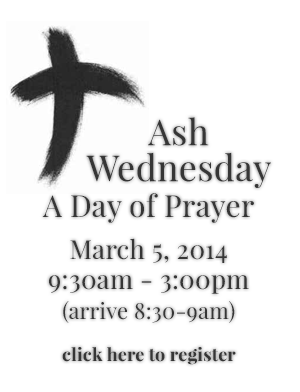
<style>
.page{position:relative;width:300px;height:392px;background:#ffffff}
.page>*{position:absolute;margin:0}
.t1{font:36px/36px "PlayfairDisplay-Regular";letter-spacing:0.01em;color:#363636}
.t2{font:26px/30px "PlayfairDisplay-Regular";letter-spacing:0.01em;color:#363636}
.t3{font:30px/30px "PlayfairDisplay-Regular";letter-spacing:0.01em;color:#363636}
.t4{font:22px/30px "PlayfairDisplay-Regular";letter-spacing:0.01em;color:#363636}
.t5{font:18px/30px "PlayfairDisplay-Bold";letter-spacing:0.01em;color:#363636}
</style>
<div class="page">
<p class="t1" style="left:86px;top:117px;width:185px;height:71px;text-align:center">Ash Wednesday</p>
<p class="t2" style="left:42px;top:193px;width:212px;height:172px;text-align:center"><span class="t3">A Day of Prayer<br><br></span>March 5, 2014<br>9:30am - 3:00pm<br><span class="t4">(arrive 8:30-9am)<br><br></span><span class="t5">click here to register</span></p>
</div>
